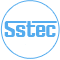
<style>
.page{position:relative;width:60px;height:60px;background:#ffffff}
.page>*{position:absolute;margin:0}
.t1{font:24px "FerroRosso";color:#55acee;scale:0.94 1}
</style>
<div class="page">
<p class="t1" style="left:4px;top:21px;width:53px;height:16px">Sstec</p>
</div>
